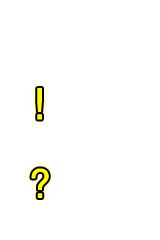
<style>
.page{position:relative;width:160px;height:240px;background:#ffffff}
.page>*{position:absolute;margin:0}
.t1{font:48px "InaiMathi";color:#fffc00;font-weight:bold}
</style>
<div class="page">
<p class="t1" style="left:37px;top:88px;width:5px;height:32px">!</p>
<p class="t1" style="left:31px;top:168px;width:18px;height:30px">?</p>
</div>
